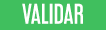
<style>
.page{position:relative;width:106px;height:30px;background:#40bf5e}
.page>*{position:absolute;margin:0}
.t1{font:25px "LibelSuitRg-Regular";letter-spacing:0.01em;color:#ffffff}
</style>
<div class="page">
<p class="t1" style="left:22px;top:3px;width:61px;height:21px">VALIDAR</p>
</div>
